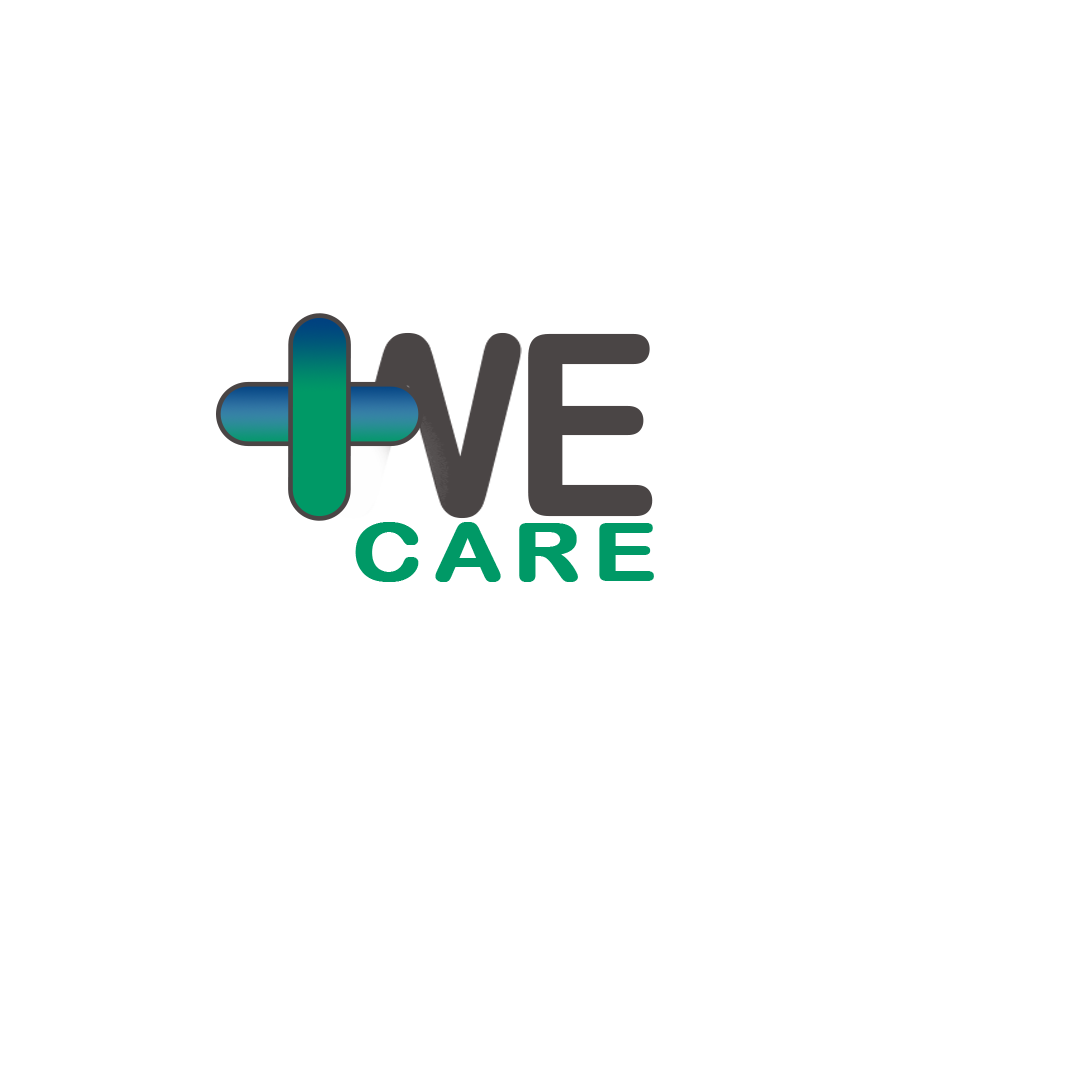
<style>
.page{position:relative;width:1080px;height:1080px;background:#ffffff}
.page>*{position:absolute;margin:0}
.t1{font:252.4px "ArialRoundedMTBold";letter-spacing:0.025em;color:#4a4545;font-weight:bold;scale:0.87 1}
.t2{font:80px "ArialRoundedMTBold";letter-spacing:0.1em;color:#009966;font-weight:bold;scale:1.18 1}
</style>
<div class="page">
<p class="t1" style="left:528px;top:333px;width:125px;height:184px">E</p>
<p class="t2" style="left:355px;top:522px;width:299px;height:60px">CARE</p>
</div>
